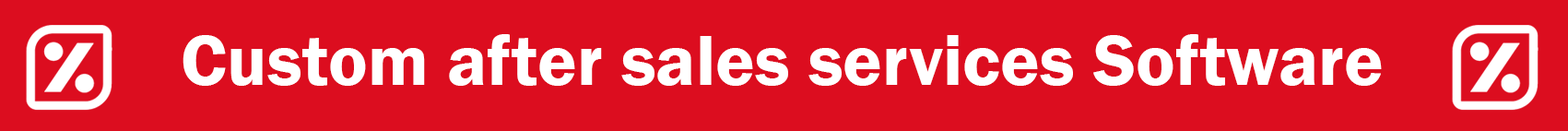
<style>
.page{position:relative;width:1568px;height:131px;background:#dc0d1f}
.page>*{position:absolute;margin:0}
.t1{font:73.7px "FranklinGothic-Demi";color:#ffffff}
</style>
<div class="page">
<p class="t1" style="left:183px;top:34px;width:1199px;height:52px">Custom after sales services Software</p>
</div>
